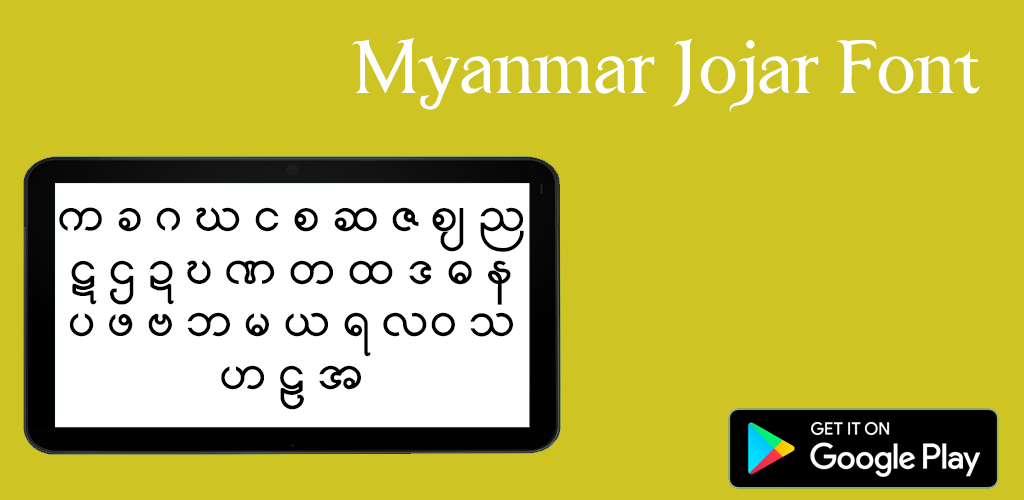
<style>
.page{position:relative;width:1024px;height:500px;background:#cec424}
.page>*{position:absolute;margin:0}
.t1{font:70px "PaOhZGJojar";color:#ffffff}
.t2{font:44px "PaOhZGJojar";color:#000000}
</style>
<div class="page">
<p class="t1" style="left:352px;top:37px;width:628px;height:76px">Myanmar Jojar Font</p>
<p class="t2" style="left:59px;top:207px;width:465px;height:203px;text-align:center">က ခ ဂ ဃ င စ ဆ ဇ စ် ည<br>ဋ ဌ ဍ ဎ ဏ တ ထ ဒ ဓ န<br>ပ ဖ ဗ ဘ မ ယ ရ လဝ သ<br>ဟ ဠ အ</p>
</div>
